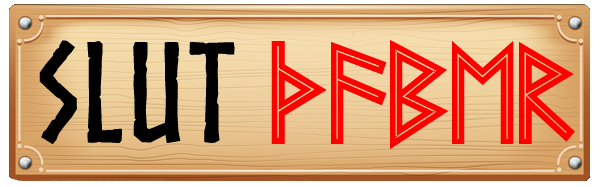
<style>
.page{position:relative;width:600px;height:187px}
.page>*{position:absolute;margin:0}
.t1{font:136.5px "Norse-Bold";color:#000000}
.t2{font:120.8px "FutharkAOEInline";color:#ff0000;scale:0.96 1}
</style>
<div class="page">
<p class="t1" style="left:39px;top:40px;width:196px;height:104px">Slut</p>
<p class="t2" style="left:271px;top:40px;width:304px;height:109px">Taber</p>
</div>
